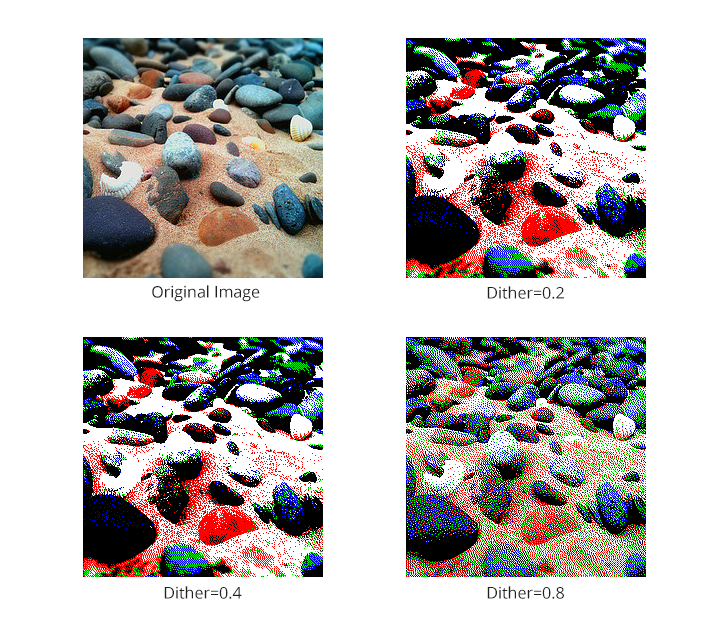
<style>
.page{position:relative;width:728px;height:637px;background:#ffffff}
.page>*{position:absolute;margin:0}
.t1{font:16px "OpenSans";color:#202020}
</style>
<div class="page">
<p class="t1" style="left:152px;top:285px;width:108px;height:17px">Original Image</p>
<p class="t1" style="left:487px;top:286px;width:77px;height:13px">Dither=0.2</p>
<p class="t1" style="left:164px;top:586px;width:78px;height:13px">Dither=0.4</p>
<p class="t1" style="left:487px;top:586px;width:77px;height:13px">Dither=0.8</p>
</div>
